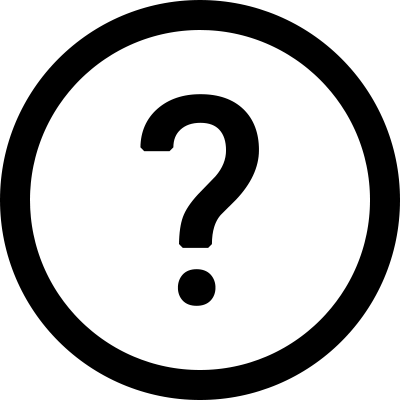
<style>
.page{position:relative;width:400px;height:400px;background:#ffffff}
.page>*{position:absolute;margin:0}
.t1{font:280px "Roboto-Regular";letter-spacing:0.03em;color:#000000;font-weight:bold}
</style>
<div class="page">
<p class="t1" style="left:140px;top:94px;width:119px;height:212px">?</p>
</div>
